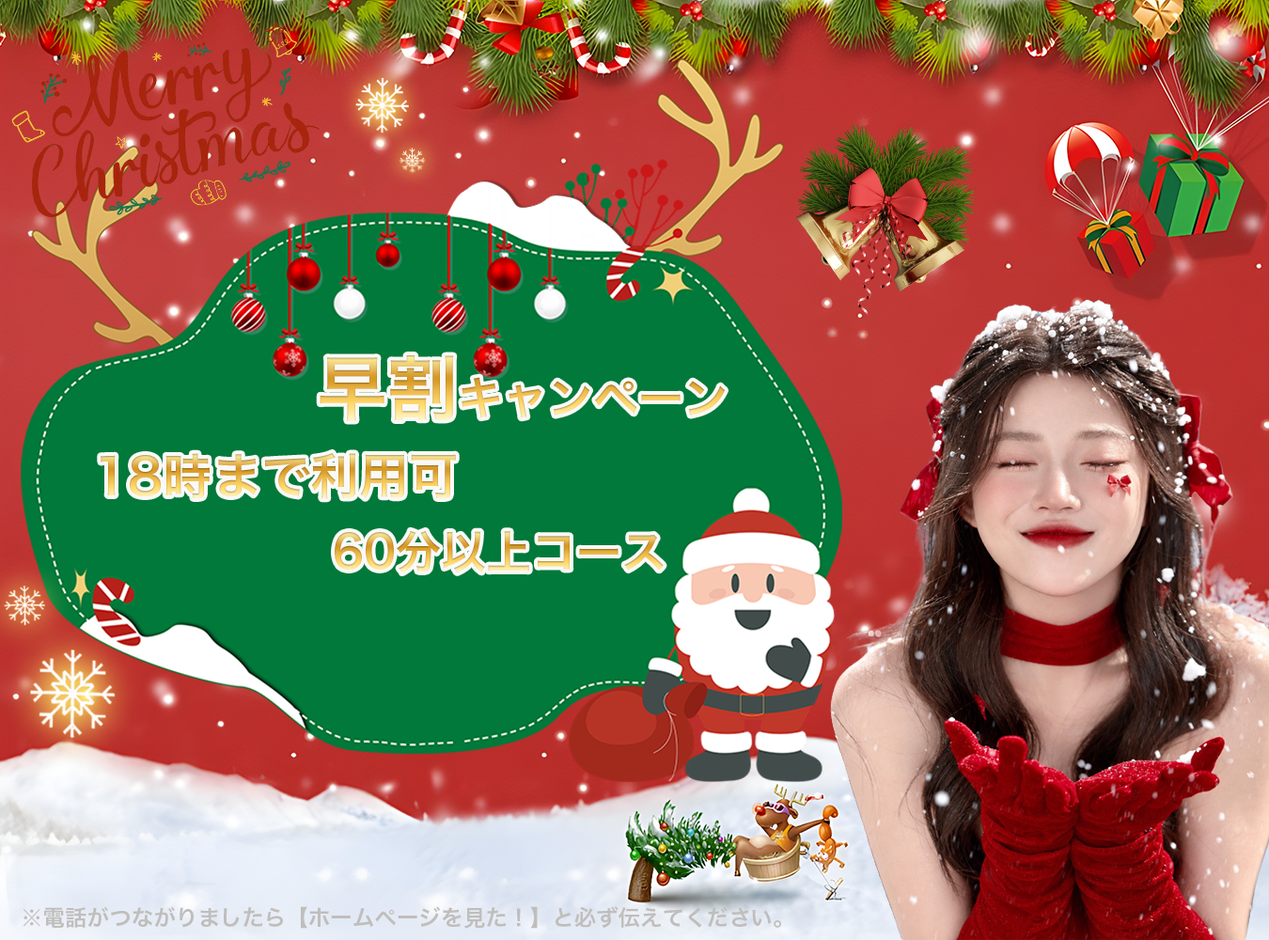
<style>
.page{position:relative;width:1269px;height:940px}
.page>*{position:absolute;margin:0}
.t1{font:45.1px "HiraKakuPro-W6"}
.t2{font:70.5px "HiraKakuPro-W6"}
.t3{font:49.1px "HiraKakuPro-W6"}
.t4{font:22.1px "HiraKakuPro-W6";color:#c0bebb}
</style>
<div class="page">
<p class="t1" style="left:320px;top:355px;width:406px;height:66px"><span class="t2">早割</span>キャンペーン</p>
<p class="t3" style="left:101px;top:452px;width:355px;height:47px">18時まで利用可</p>
<p class="t1" style="left:335px;top:530px;width:329px;height:43px">60分以上コース</p>
<p class="t4" style="left:23px;top:906px;width:758px;height:23px">※電話がつながりましたら【ホームページを見た！】と必ず伝えてください。</p>
</div>
